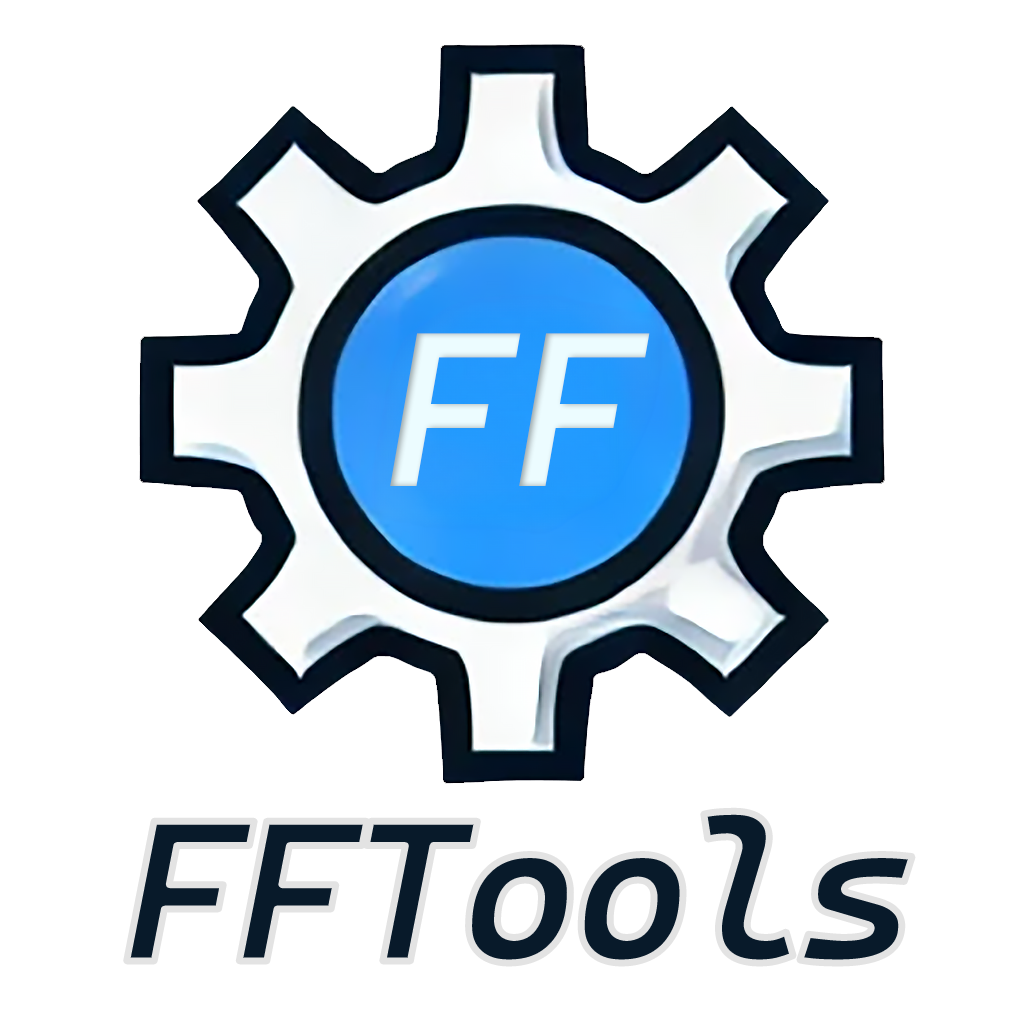
<style>
.page{position:relative;width:1024px;height:1024px;background:#ffffff}
.page>*{position:absolute;margin:0}
.t1{font:220px "CascadiaCode-SemiBoldItalic";color:#ecfcff}
.t2{font:201.2px "CascadiaCode-BoldItalic";letter-spacing:-0.05em;color:#081a2a;scale:1.04 1}
</style>
<div class="page">
<p class="t1" style="left:390px;top:333px;width:260px;height:153px">FF</p>
<p class="t2" style="left:126px;top:811px;width:786px;height:152px">FFTools</p>
</div>
